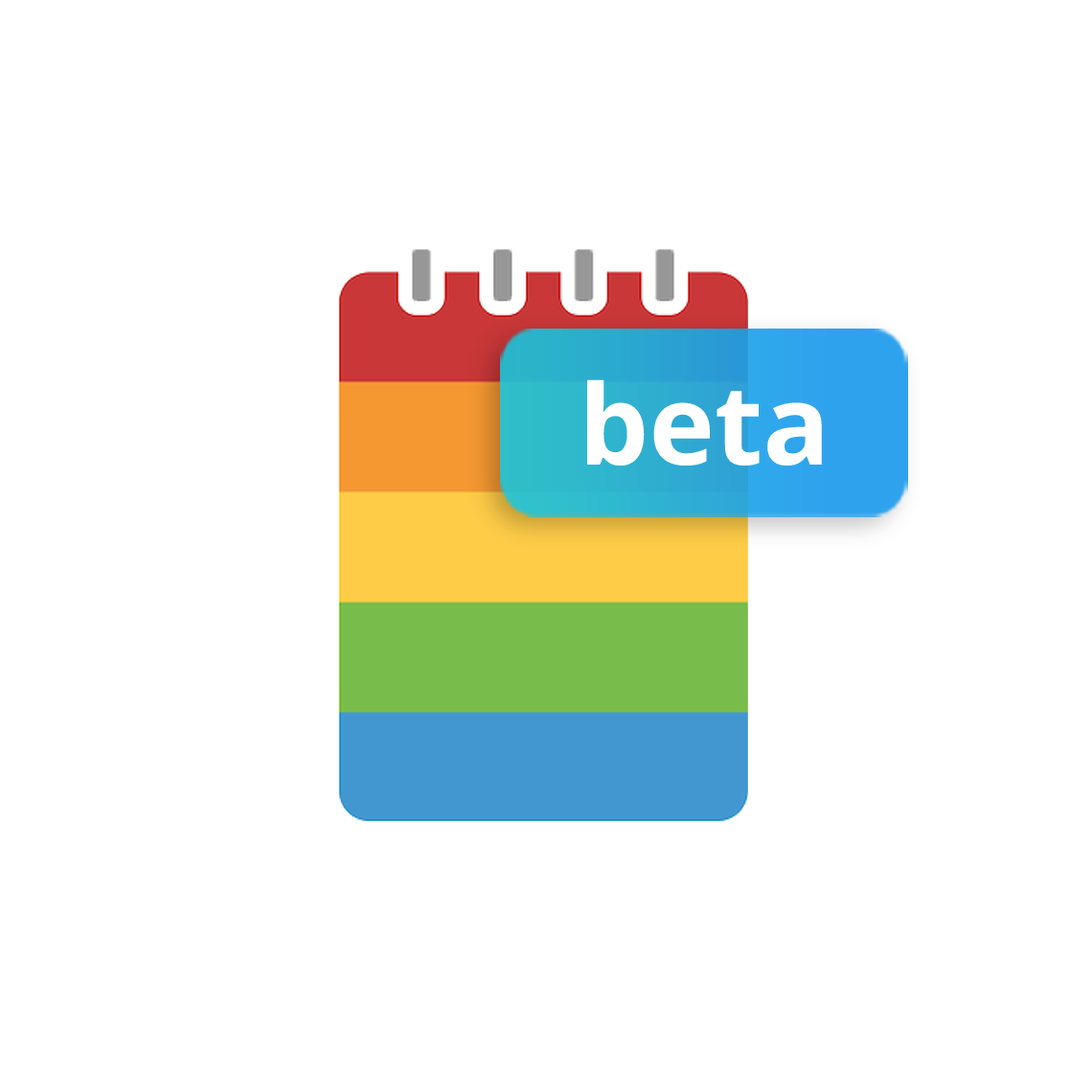
<style>
.page{position:relative;width:1092px;height:1092px;background:#ffffff}
.page>*{position:absolute;margin:0}
.t1{font:111.1px "OpenSans-Bold";color:#ffffff}
</style>
<div class="page">
<p class="t1" style="left:587px;top:379px;width:235px;height:87px">beta</p>
</div>
